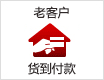
<style>
.page{position:relative;width:104px;height:80px;background:#ffffff}
.page>*{position:absolute;margin:0}
.t1{font:12px "MicrosoftYaHei";color:#302929}
</style>
<div class="page">
<p class="t1" style="left:33px;top:6px;width:36px;height:13px">老客户</p>
<p class="t1" style="left:28px;top:62px;width:48px;height:13px">货到付款</p>
</div>
